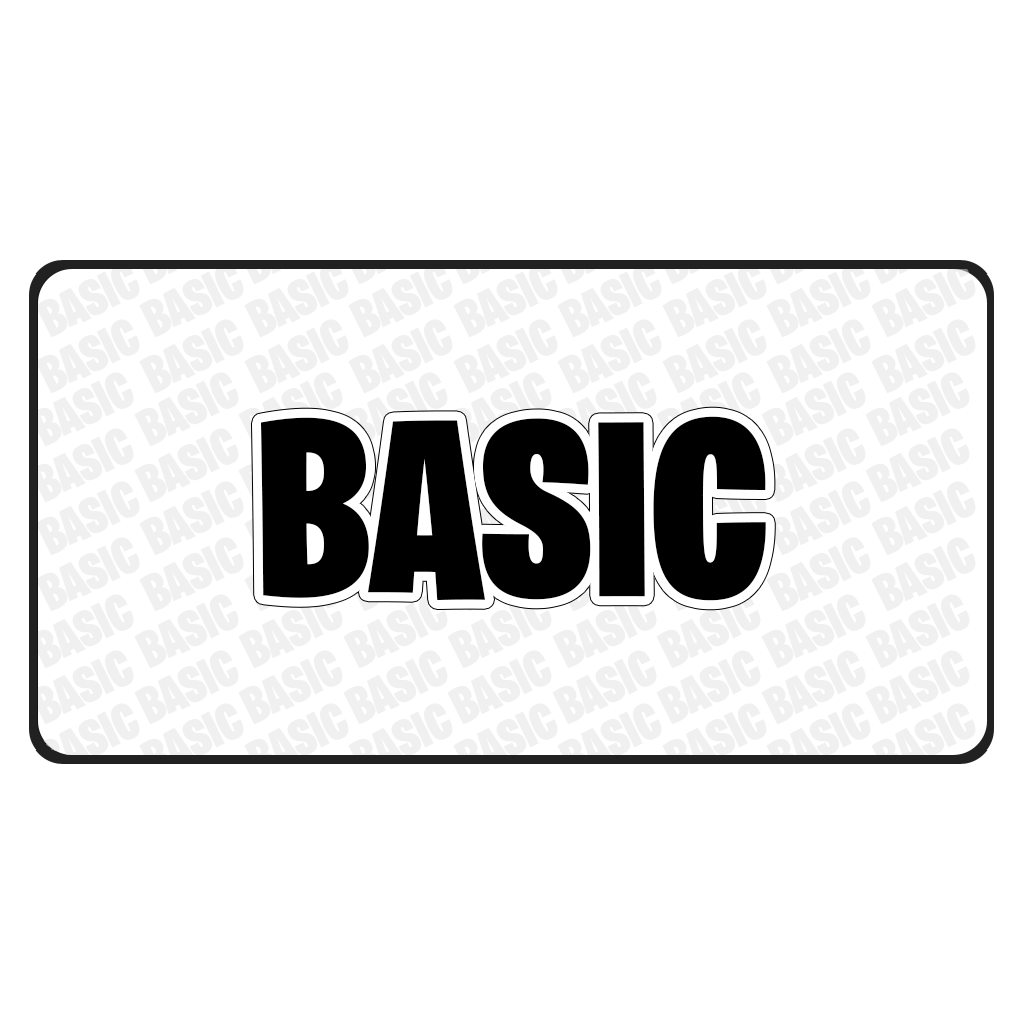
<style>
.page{position:relative;width:1024px;height:1024px;background:#ffffff}
.page>*{position:absolute;margin:0}
.t1{font:250px "BurbankBigCondensed-Black";color:#000000}
</style>
<div class="page">
<p class="t1" style="left:261px;top:416px;width:505px;height:185px">BASIC</p>
</div>
